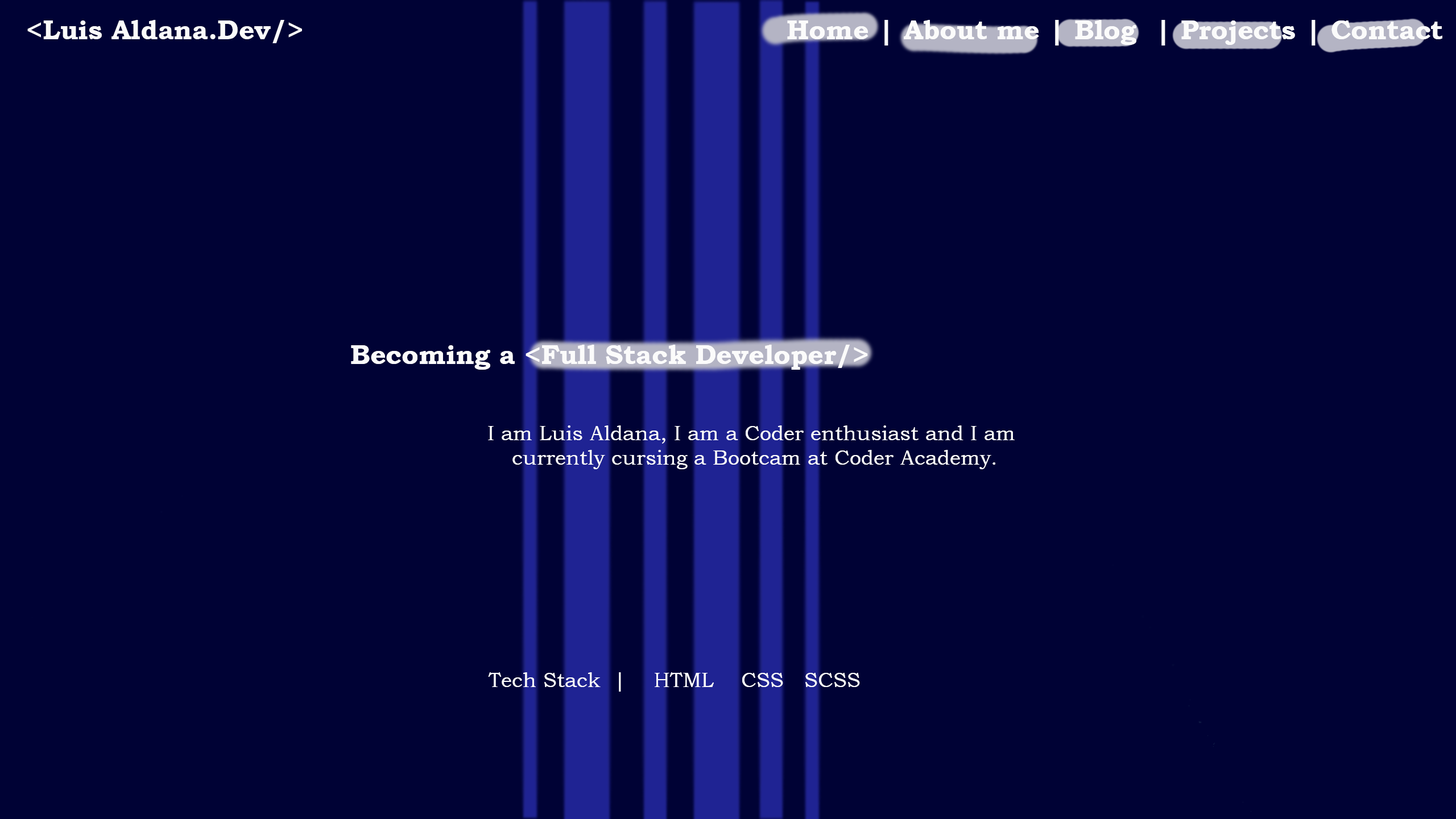
<style>
.page{position:relative;width:1456px;height:819px;background:#000235}
.page>*{position:absolute;margin:0}
.t1{font:27.3px "BookmanOldStyle-Bold";color:#fbfbfb}
.t2{font:20.5px "BookmanOldStyle";color:#fbfbfb}
</style>
<div class="page">
<p class="t1" style="left:27px;top:20px;width:275px;height:23px">&lt;Luis Aldana.Dev/&gt;</p>
<p class="t1" style="left:787px;top:20px;width:655px;height:25px">Home | About me | Blog  | Projects | Contact</p>
<p class="t1" style="left:351px;top:345px;width:517px;height:25px">Becoming a &lt;Full Stack Developer/&gt;</p>
<p class="t2" style="left:488px;top:425px;width:527px;height:44px;text-align:center">I am Luis Aldana, I am a Coder enthusiast and I am <br>currently cursing a Bootcam at Coder Academy.</p>
<p class="t2" style="left:488px;top:672px;width:372px;height:20px">Tech Stack  |    HTML    CSS   SCSS</p>
</div>
